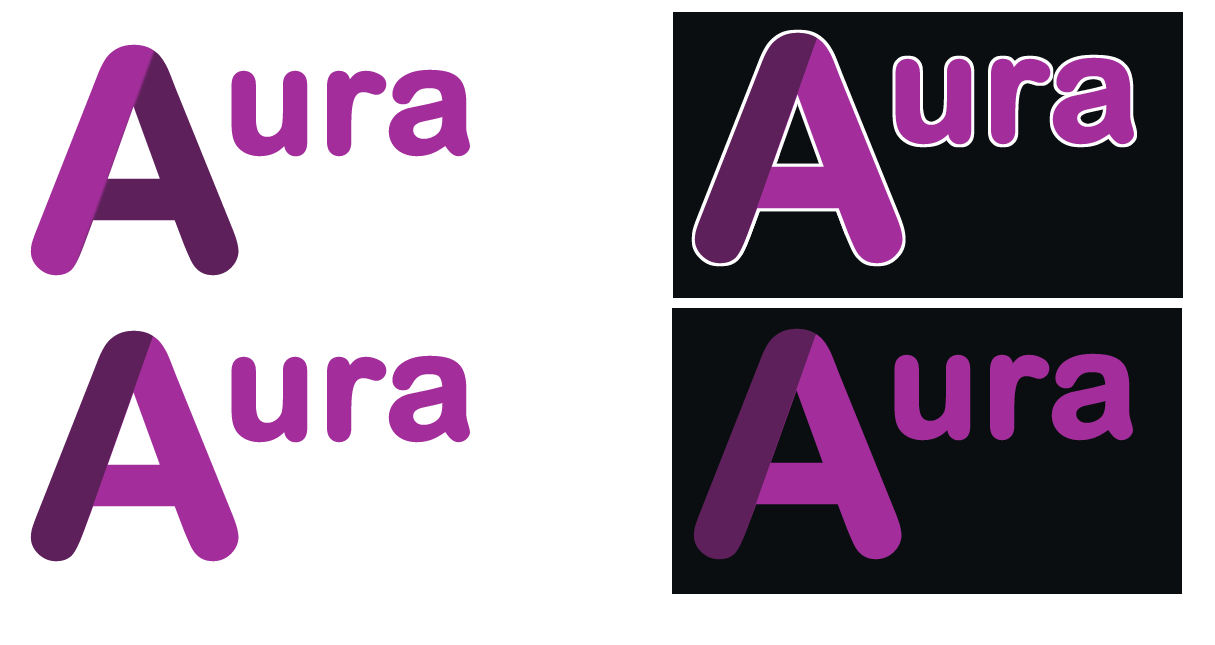
<style>
.page{position:relative;width:1215px;height:645px;background:#ffffff}
.page>*{position:absolute;margin:0}
.t1{font:150px "ArialRoundedMTBold";color:#a32e9b;font-weight:bold}
</style>
<div class="page">
<p class="t1" style="left:895px;top:57px;width:239px;height:88px">ura</p>
<p class="t1" style="left:231px;top:69px;width:239px;height:88px">ura</p>
<p class="t1" style="left:894px;top:353px;width:239px;height:88px">ura</p>
<p class="t1" style="left:231px;top:355px;width:239px;height:88px">ura</p>
</div>
